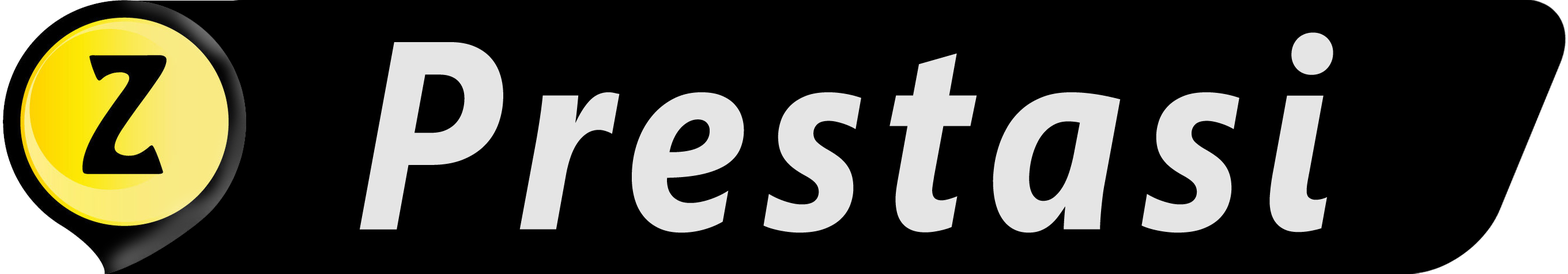
<style>
.page{position:relative;width:1568px;height:274px;background:#000000}
.page>*{position:absolute;margin:0}
.t1{font:267.2px "SegoeUI-BoldItalic";letter-spacing:0.1em;color:#e5e5e5;scale:0.87 1}
</style>
<div class="page">
<p class="t1" style="left:360px;top:32px;width:973px;height:201px">Prestasi</p>
</div>
